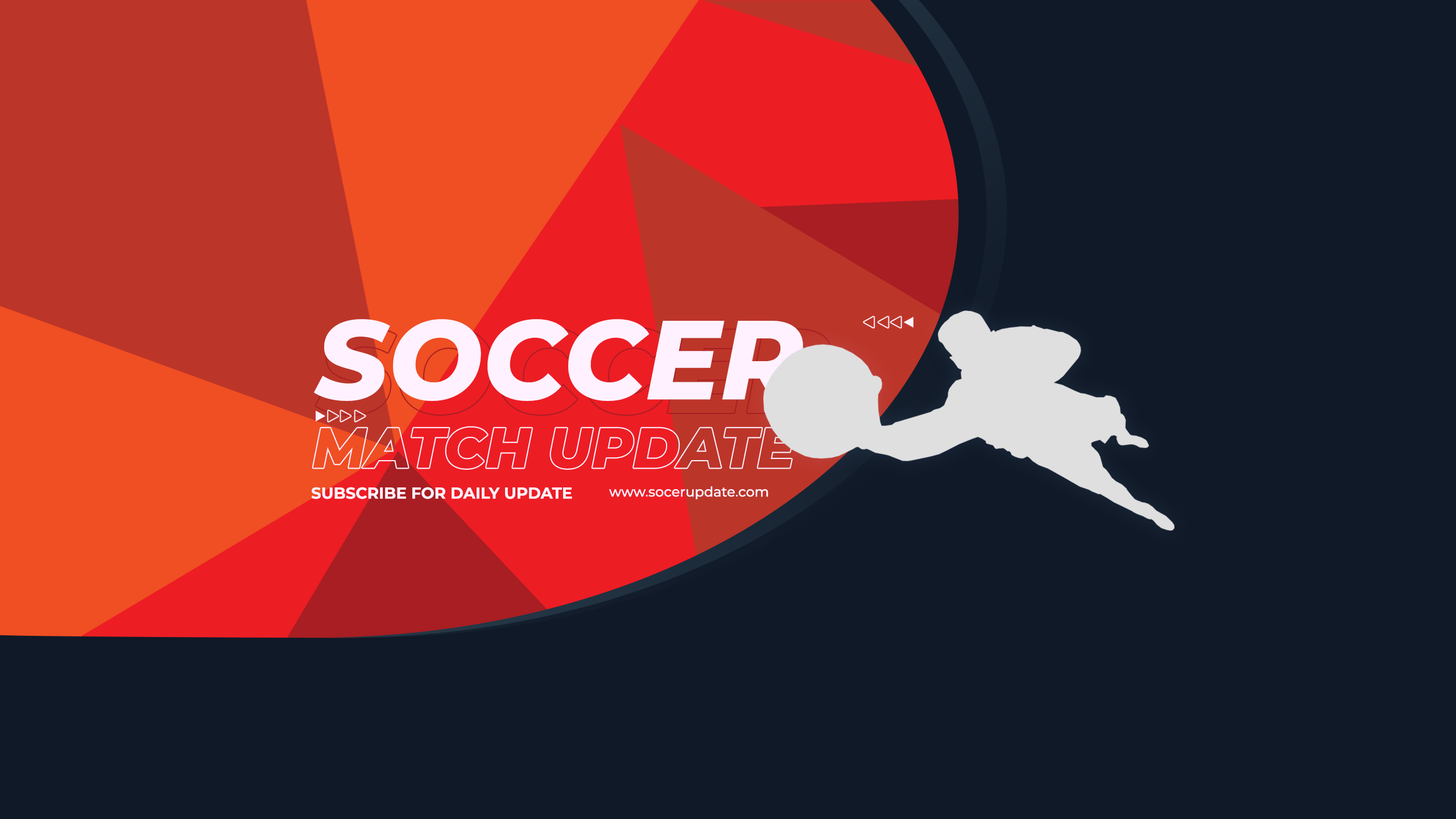
<style>
.page{position:relative;width:1456px;height:819px;background:#101927}
.page>*{position:absolute;margin:0}
.t1{font:112.1px "Montserrat-ExtraBoldItalic";color:#fff1ff}
.t2{font:15.8px "Montserrat-Bold";color:#fff1ff}
.t3{font:13.7px "Montserrat-Medium";color:#fff1ff}
</style>
<div class="page">
<p class="t1" style="left:314px;top:319px;width:489px;height:82px">SOCCER</p>
<p class="t2" style="left:311px;top:487px;width:261px;height:12px">SUBSCRIBE FOR DAILY UPDATE</p>
<p class="t3" style="left:609px;top:486px;width:159px;height:13px">www.socerupdate.com</p>
</div>
